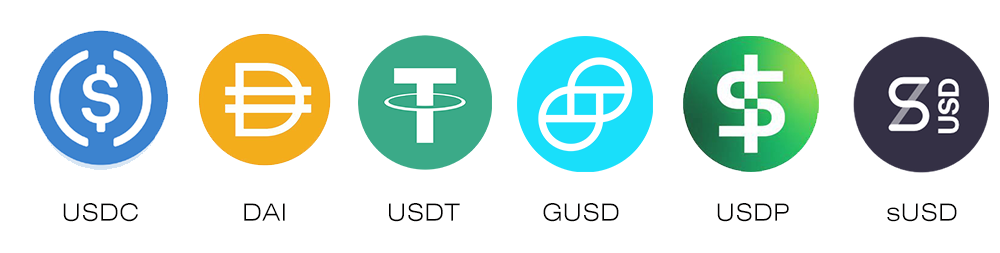
<style>
.page{position:relative;width:1000px;height:253px;background:#ffffff}
.page>*{position:absolute;margin:0}
.t1{font:24px "Swiss721BT-LightExtended";letter-spacing:0.024em;color:#010000}
</style>
<div class="page">
<p class="t1" style="left:63px;top:203px;width:75px;height:19px">USDC</p>
<p class="t1" style="left:244px;top:203px;width:41px;height:18px">DAI</p>
<p class="t1" style="left:389px;top:203px;width:71px;height:19px">USDT</p>
<p class="t1" style="left:543px;top:203px;width:76px;height:19px">GUSD</p>
<p class="t1" style="left:717px;top:203px;width:72px;height:19px">USDP</p>
<p class="t1" style="left:887px;top:203px;width:70px;height:19px">sUSD</p>
</div>
